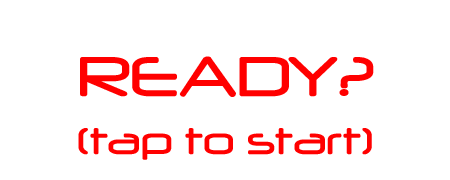
<style>
.page{position:relative;width:450px;height:180px;background:#ffffff}
.page>*{position:absolute;margin:0}
.t1{font:66px "Neuropol";color:#ff0000}
.t2{font:44px "Neuropol";color:#ff0000}
</style>
<div class="page">
<p class="t1" style="left:80px;top:56px;width:294px;height:41px">READY?</p>
<p class="t2" style="left:78px;top:128px;width:294px;height:32px">(tap to start)</p>
</div>
